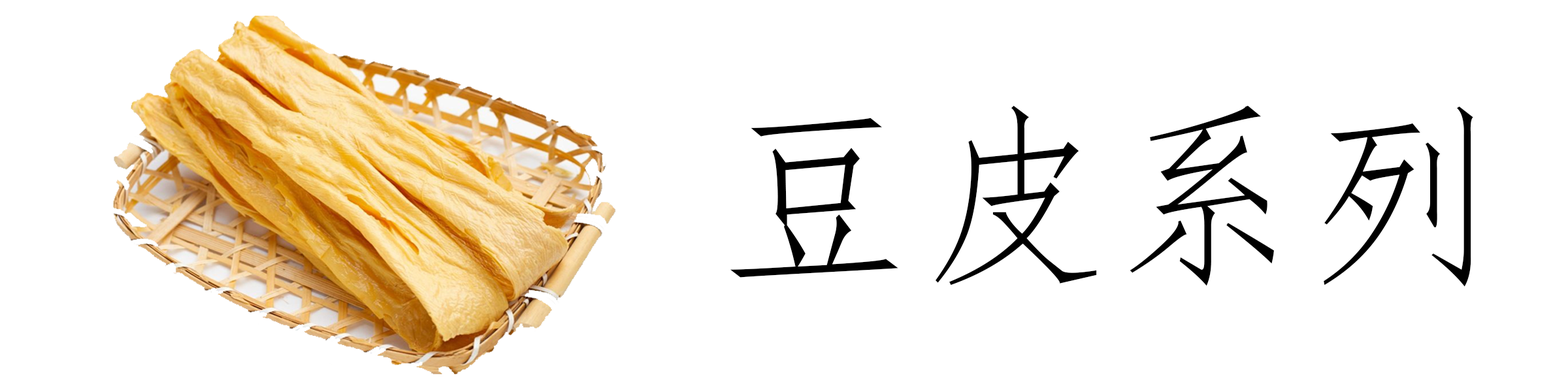
<style>
.page{position:relative;width:1568px;height:392px;background:#ffffff}
.page>*{position:absolute;margin:0}
.t1{font:196px "FangSong";color:#000000}
</style>
<div class="page">
<p class="t1" style="left:730px;top:105px;width:743px;height:182px">豆皮系列</p>
</div>
